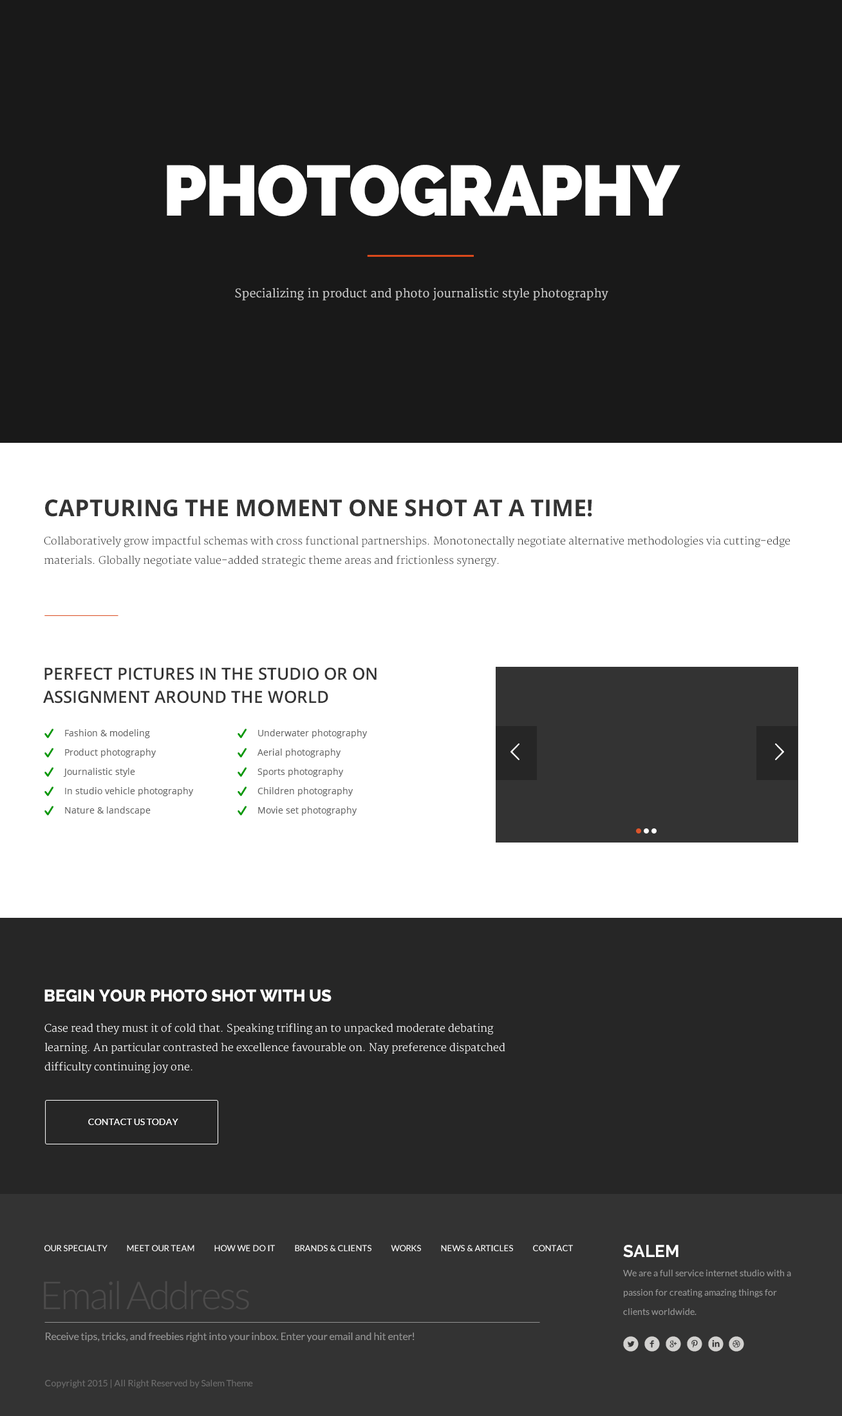
<style>
.page{position:relative;width:842px;height:1416px;background:#191919}
.page>*{position:absolute;margin:0}
.t1{font:70.8px "Raleway-Heavy";letter-spacing:-0.025em;color:#ffffff;text-transform:uppercase}
.t2{font:11.6px "Merriweather";color:#cccccc}
.t3{font:23.2px "OpenSans-Bold";color:#333333;text-transform:uppercase}
.t4{font:10.3px/19.3px "Merriweather-Light";color:#333333}
.t5{font:16.7px/23.2px "OpenSans-Semibold";color:#333333;text-transform:uppercase}
.t6{font:9px/19.3px "OpenSans";color:#646464}
.t7{font:16.7px "Raleway-ExtraBold";color:#ffffff;text-transform:uppercase}
.t8{font:10.3px/19.3px "Merriweather-Light";color:#ffffff}
.t9{font:9px "Lato-Regular";color:#ffffff;text-transform:uppercase}
.t10{font:8.4px "Lato-Regular";color:#ffffff;text-transform:uppercase}
.t11{font:9px/19.3px "Lato-Regular";color:#999999}
.t12{font:16.7px/23.2px "Raleway-Bold";color:#ffffff}
.t13{font:38.6px "Lato-Light";letter-spacing:-0.05em;color:#4c4b4b}
.t14{font:10.3px "Lato-Regular";color:#999999}
.t15{font:9px "Lato-Regular";color:#6e6e6e}
</style>
<div class="page">
<p class="t1" style="left:167px;top:165px;width:513px;height:51px">photography</p>
<p class="t2" style="left:235px;top:288px;width:373px;height:13px">Specializing in product and photo journalistic style photography</p>
<p class="t3" style="left:45px;top:500px;width:547px;height:17px">capturing the moment one shot at a time!</p>
<p class="t4" style="left:44px;top:536px;width:746px;height:31px">Collaboratively grow impactful schemas with cross functional partnerships. Monotonectally negotiate alternative methodologies via cutting-edge materials. Globally negotiate value-added strategic theme areas and frictionless synergy.</p>
<p class="t5" style="left:43px;top:668px;width:334px;height:36px">perfect pictures in the studio or on<br>assignment around the world</p>
<p class="t6" style="left:63px;top:729px;width:131px;height:87px">Fashion &amp; modeling<br>Product photography<br>Journalistic style<br>In studio vehicle photography<br>Nature &amp; landscape</p>
<p class="t6" style="left:257px;top:729px;width:111px;height:87px">Underwater photography<br>Aerial photography<br>Sports photography<br>Children photography<br>Movie set photography</p>
<p class="t7" style="left:44px;top:989px;width:288px;height:13px">begin your photo shot with us</p>
<p class="t8" style="left:44px;top:1023px;width:461px;height:51px">Case read they must it of cold that. Speaking trifling an to unpacked moderate debating learning. An particular contrasted he excellence favourable on. Nay preference dispatched difficulty continuing joy one.</p>
<p class="t9" style="left:88px;top:1119px;width:90px;height:6px">contact us today</p>
<p class="t10" style="left:44px;top:1245px;width:529px;height:6px">Our Specialty          Meet Our Team          How We Do It          Brands &amp; Clients          Works          News &amp; Articles          Contact</p>
<p class="t11" style="left:623px;top:1245px;width:168px;height:70px"><span class="t12">SALEM<br></span>We are a full service internet studio with a passion for creating amazing things for clients worldwide.</p>
<p class="t13" style="left:44px;top:1281px;width:205px;height:29px">Email Address</p>
<p class="t14" style="left:46px;top:1333px;width:369px;height:9px">Receive tips, tricks, and freebies right into your inbox. Enter your email and hit enter!</p>
<p class="t15" style="left:45px;top:1380px;width:208px;height:9px">Copyright 2015 | All Right Reserved by Salem Theme</p>
</div>
